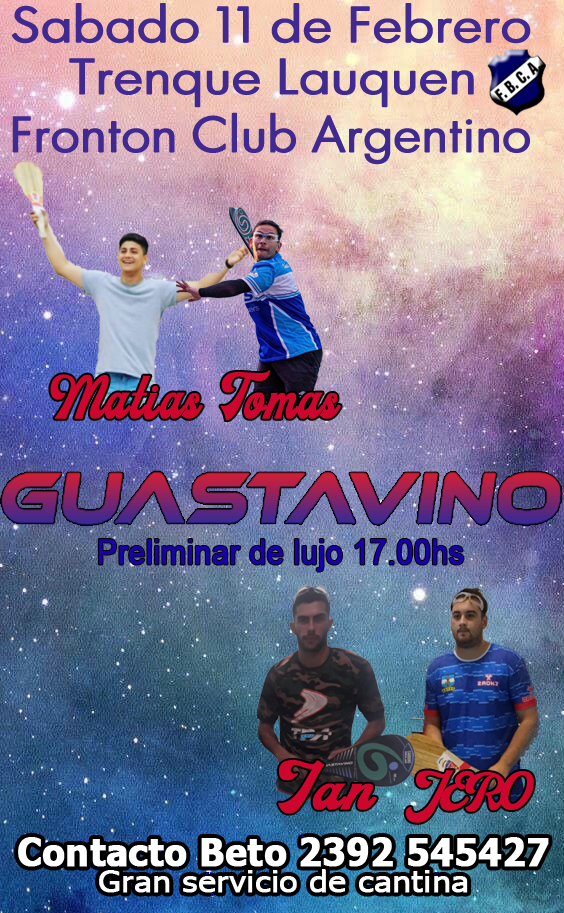
<style>
.page{position:relative;width:564px;height:913px}
.page>*{position:absolute;margin:0}
.t1{font:46.4px "LuzSans-Book";color:#402990;font-weight:bold;scale:1.13 1}
.t2{font:46.4px "LuzSans-Book";color:#402990;font-weight:bold;scale:1.07 1}
.t3{font:60px "MilestoneFreeVersion-Script";color:#cd062e;font-weight:bold;scale:0.85 1}
.t4{font:33.9px "ArialMT";color:#1901a9;font-weight:bold;scale:0.88 1}
.t5{font:60px "MilestoneFreeVersion-Script";color:#cd062e;font-weight:bold;scale:1.11 1}
.t6{font:51.3px "MilestoneFreeVersion-Script";color:#cd062e;font-weight:bold;scale:1.05 1}
.t7{font:37.9px "Tahoma-Bold";color:#ffffff;font-weight:bold;scale:0.95 1}
.t8{font:30.3px "Tahoma";color:#ffffff;font-weight:bold;scale:1.09 1}
</style>
<div class="page">
<p class="t1" style="left:11px;top:3px;width:520px;height:41px">Sabado 11 de Febrero</p>
<p class="t1" style="left:69px;top:58px;width:405px;height:50px">Trenque Lauquen</p>
<p class="t2" style="left:12px;top:112px;width:518px;height:53px">Fronton Club Argentino</p>
<p class="t3" style="left:50px;top:374px;width:153px;height:46px">Matias</p>
<p class="t3" style="left:220px;top:370px;width:121px;height:51px">Tomas</p>
<p class="t4" style="left:98px;top:539px;width:366px;height:33px">Preliminar de lujo 17.00hs</p>
<p class="t5" style="left:278px;top:760px;width:99px;height:54px">Ian</p>
<p class="t6" style="left:405px;top:770px;width:129px;height:53px">JERO</p>
<p class="t7" style="left:18px;top:837px;width:531px;height:30px">Contacto Beto 2392 545427</p>
<p class="t8" style="left:99px;top:869px;width:369px;height:24px">Gran servicio de cantina</p>
</div>
